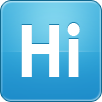
<style>
.page{position:relative;width:102px;height:102px}
.page>*{position:absolute;margin:0}
.t1{font:72px "CenturyGothic-Bold";color:#ffffff}
</style>
<div class="page">
<p class="t1" style="left:21px;top:22px;width:59px;height:54px">Hi</p>
<p class="t1" style="left:21px;top:23px;width:59px;height:54px">Hi</p>
</div>
